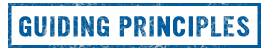
<style>
.page{position:relative;width:270px;height:50px;background:#ffffff}
.page>*{position:absolute;margin:0}
.t1{font:24.6px "Ultramagnetic";letter-spacing:0.025em;color:#005b9d;font-weight:bold}
</style>
<div class="page">
<p class="t1" style="left:19px;top:16px;width:231px;height:21px">GUIDING PRINCIPLES</p>
</div>
